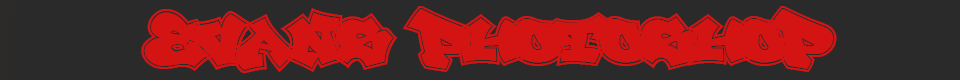
<style>
.page{position:relative;width:960px;height:80px;background:#2b2a2a}
.page>*{position:absolute;margin:0}
.t1{font:60px "SpokenPERSONALUSEONLY";color:#d41313}
</style>
<div class="page">
<p class="t1" style="left:141px;top:6px;width:696px;height:68px">evans photoshop</p>
</div>
